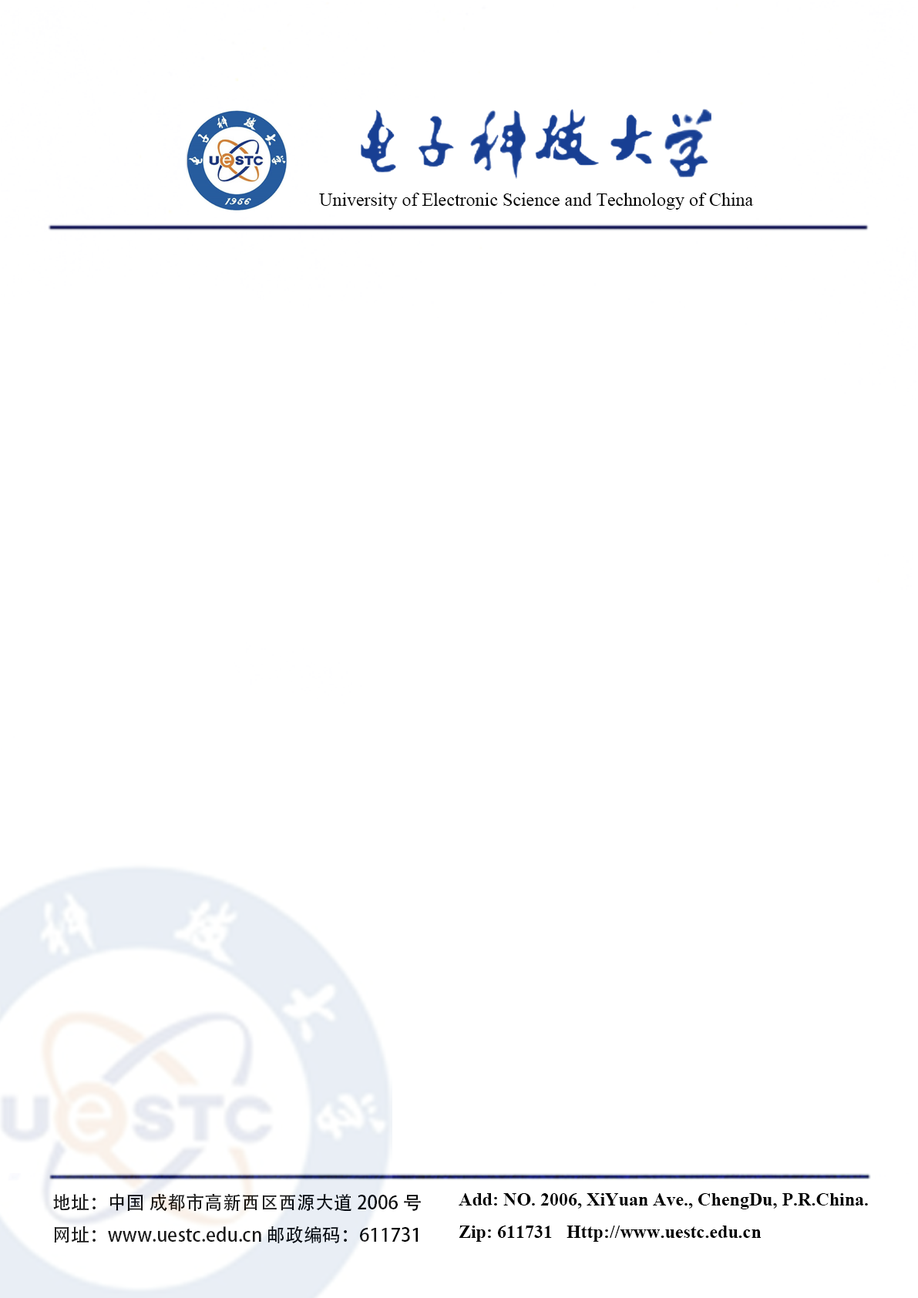
<style>
.page{position:relative;width:918px;height:1298px;background:#ffffff}
.page>*{position:absolute;margin:0}
.t1{font:9.3px "TimesNewRomanPSMT";color:#000000}
.t2{font:9.3px "AdobeHeitiStd-Regular"}
.t3{font:9.3px "TimesNewRomanPS-BoldMT";color:#000000}
</style>
<div class="page">
<p class="t1" style="left:319px;top:193px;width:435px;height:17px">University of Electronic Science and Technology of China</p>
<p class="t2" style="left:53px;top:1194px;width:368px;height:50px">地址： 中国 成都市高新西区西源大道2006号<br>网址： www.uestc.edu.cn 邮政编码：611731</p>
<p class="t3" style="left:459px;top:1194px;width:409px;height:48px">Add: NO. 2006, XiYuan Ave., ChengDu, P.R.China.<br>Zip: 611731   Http://www.uestc.edu.cn</p>
</div>
